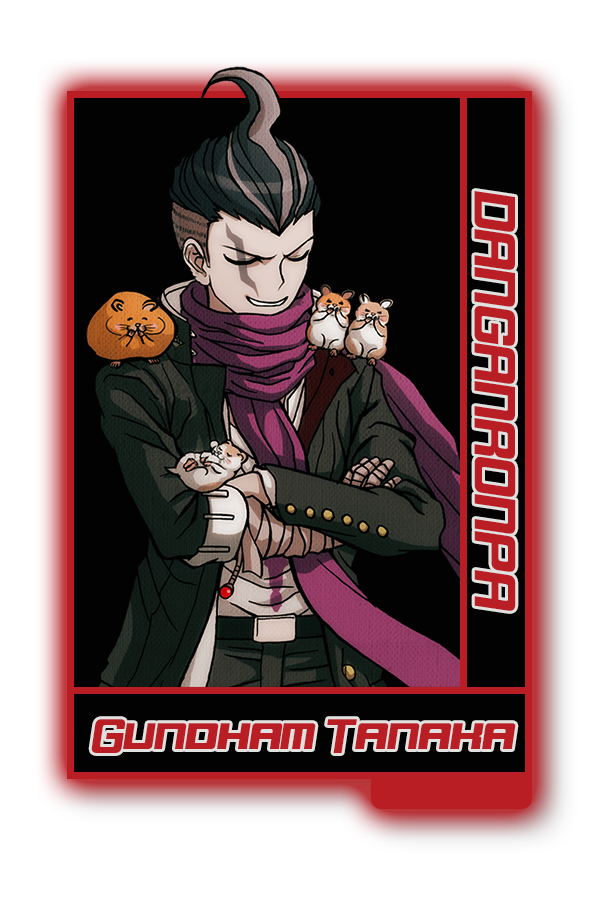
<style>
.page{position:relative;width:600px;height:900px;background:#020202}
.page>*{position:absolute;margin:0}
.t1{font:48.8px "DorBlue";color:#bb2c2e}
.t2{font:40.6px "DorBlue";color:#bb2c2e}
</style>
<div class="page">
<p class="t1" style="left:474px;top:191px;width:42px;height:420px;rotate:90deg">DANGANRONPA</p>
<p class="t2" style="left:91px;top:719px;width:425px;height:34px">Gundham Tanaka</p>
</div>
